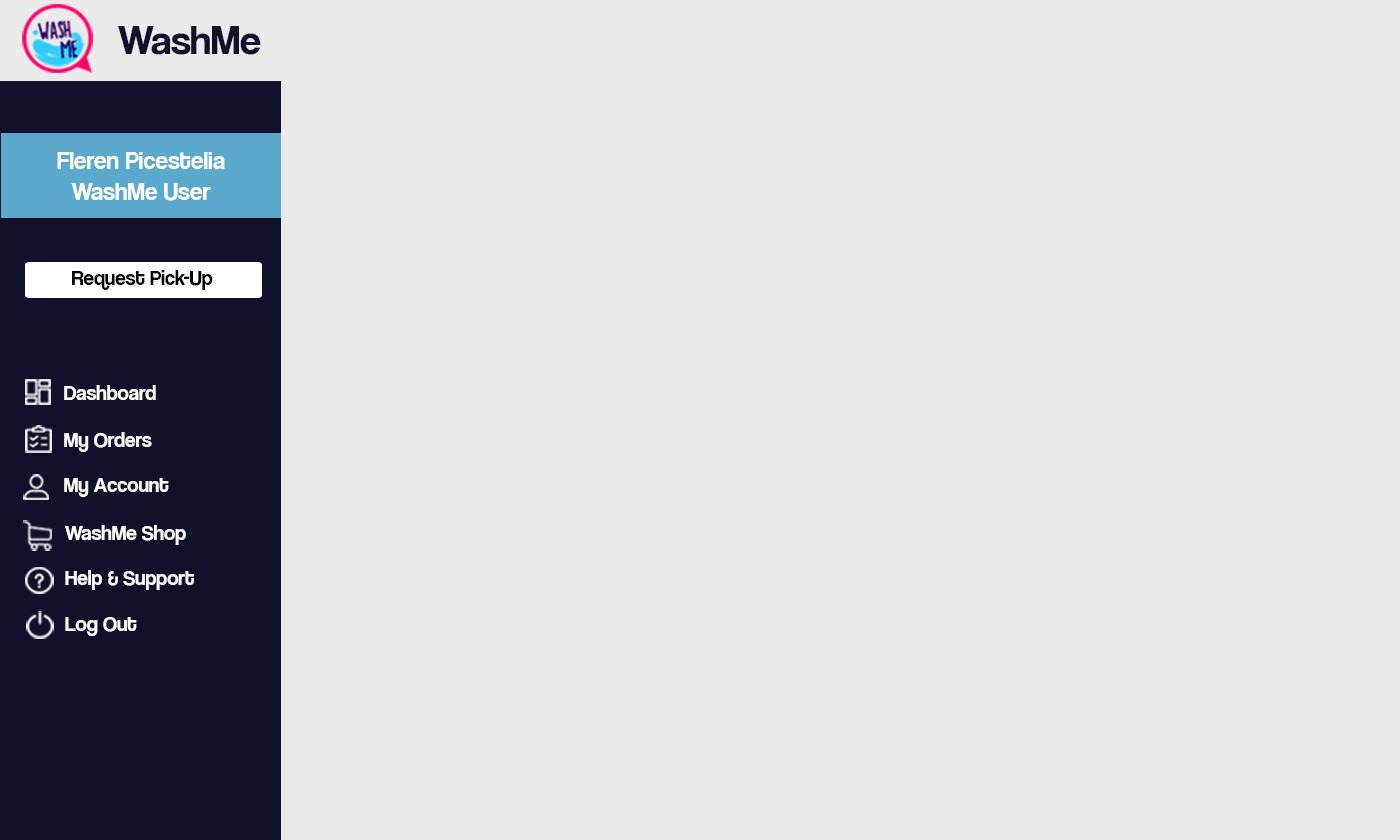
<style>
.page{position:relative;width:1400px;height:840px;background:#ebebeb}
.page>*{position:absolute;margin:0}
.t1{font:42px "CoolveticaRg-Regular";color:#120f2b}
.t2{font:25.2px "CoolveticaRg-Regular";color:#ffffff}
.t3{font:21px "CoolveticaRg-Regular";color:#000000}
.t4{font:21px "CoolveticaRg-Regular";color:#ffffff}
</style>
<div class="page">
<p class="t1" style="left:118px;top:26px;width:143px;height:29px">WashMe</p>
<p class="t2" style="left:57px;top:152px;width:168px;height:49px;text-align:center">Fleren Picestelia<br>WashMe User</p>
<p class="t3" style="left:72px;top:270px;width:141px;height:20px">Request Pick-Up</p>
<p class="t4" style="left:64px;top:385px;width:92px;height:15px">Dashboard</p>
<p class="t4" style="left:64px;top:432px;width:88px;height:20px">My Orders</p>
<p class="t4" style="left:64px;top:478px;width:105px;height:19px">My Account</p>
<p class="t4" style="left:65px;top:525px;width:121px;height:20px">WashMe Shop</p>
<p class="t4" style="left:65px;top:570px;width:129px;height:20px">Help &amp; Support</p>
<p class="t4" style="left:65px;top:617px;width:72px;height:19px">Log Out</p>
</div>
